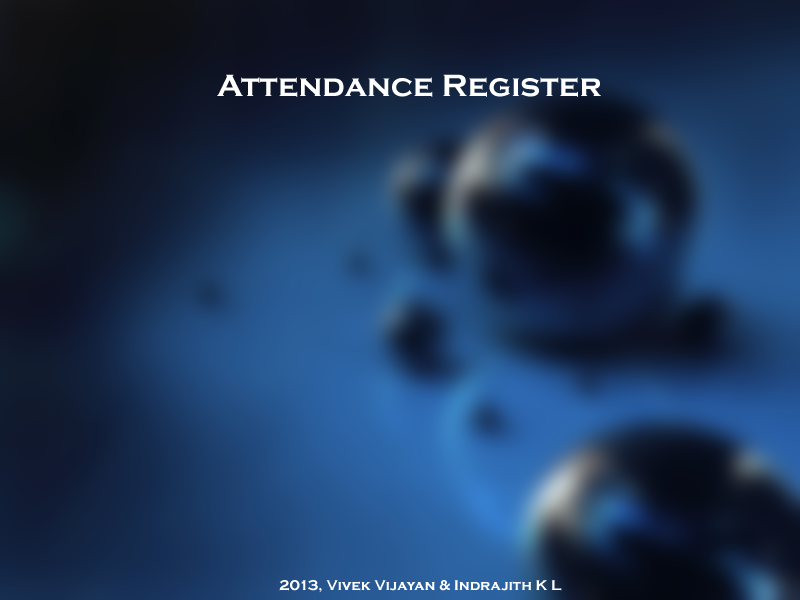
<style>
.page{position:relative;width:800px;height:600px}
.page>*{position:absolute;margin:0}
.t1{font:32px "CopperplateGothic-Bold";color:#ffffff}
.t2{font:14.7px "CopperplateGothic-Bold";color:#ffffff}
</style>
<div class="page">
<p class="t1" style="left:217px;top:74px;width:384px;height:23px">Attendance Register</p>
<p class="t2" style="left:279px;top:580px;width:283px;height:13px">2013, Vivek Vijayan &amp; Indrajith K L</p>
</div>
